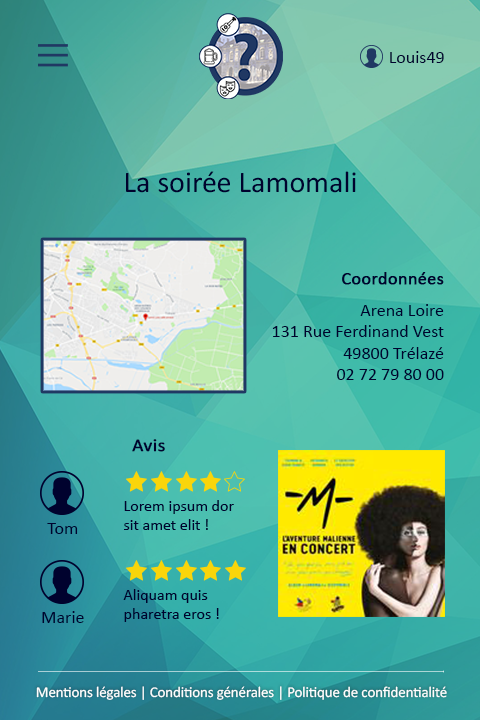
<style>
.page{position:relative;width:480px;height:720px}
.page>*{position:absolute;margin:0}
.t1{font:18px "Calibri";color:#00022e}
.t2{font:30px "Calibri";color:#00022e}
.t3{font:18px "Calibri";color:#00022e;font-weight:bold}
.t4{font:18px "Calibri";color:#00022e;font-weight:bold;scale:1.07 1}
.t5{font:16px "Calibri";color:#00022e}
.t6{font:15px "Calibri";letter-spacing:-0.01em;color:#ffffff}
</style>
<div class="page">
<p class="t1" style="left:390px;top:51px;width:54px;height:12px">Louis49</p>
<p class="t2" style="left:126px;top:171px;width:230px;height:22px">La soirée Lamomali</p>
<p class="t1" style="left:272px;top:272px;width:172px;height:108px;text-align:right"><span class="t3">Coordonnées<br></span>Arena Loire<br>131 Rue Ferdinand Vest<br>49800 Trélazé<br>02 72 79 80 00</p>
<p class="t4" style="left:132px;top:439px;width:33px;height:13px">Avis</p>
<p class="t5" style="left:124px;top:500px;width:110px;height:30px">Lorem ipsum dor sit amet elit !</p>
<p class="t1" style="left:47px;top:523px;width:31px;height:11px">Tom</p>
<p class="t5" style="left:123px;top:589px;width:96px;height:33px">Aliquam quis pharetra eros !</p>
<p class="t1" style="left:42px;top:611px;width:42px;height:12px">Marie</p>
<p class="t6" style="left:36px;top:686px;width:411px;height:14px">Mentions légales | Conditions générales | Politique de confidentialité</p>
</div>
